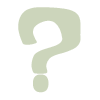
<style>
.page{position:relative;width:100px;height:100px;background:#ffffff}
.page>*{position:absolute;margin:0}
.t1{font:86.4px "BlackCarrot";letter-spacing:-0.01em;color:#ccd5bb;scale:0.83 1}
</style>
<div class="page">
<p class="t1" style="left:18px;top:7px;width:63px;height:86px">?</p>
</div>
